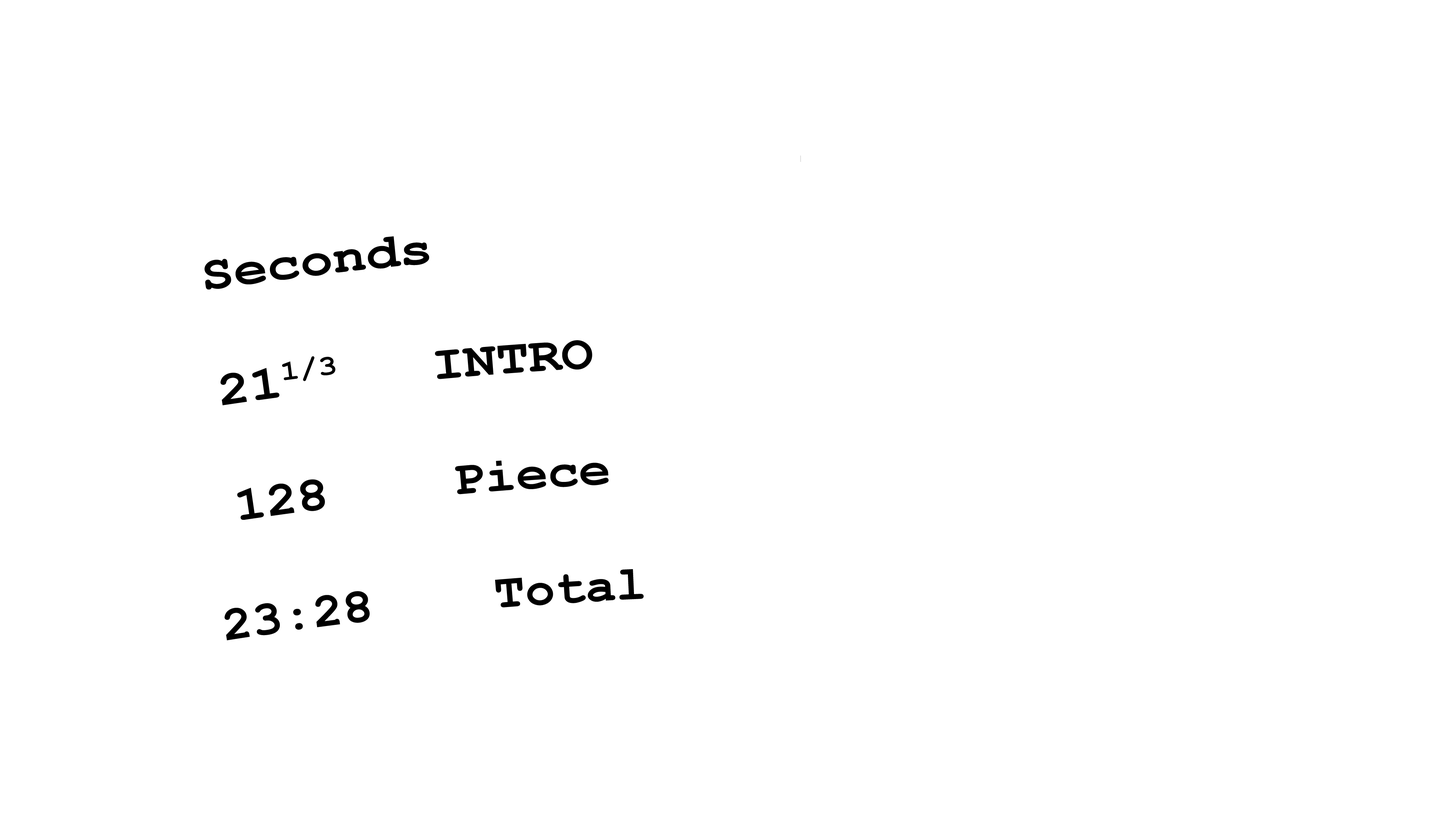
<style>
.page{position:relative;width:1456px;height:819px;background:#ffffff}
.page>*{position:absolute;margin:0}
.t1{font:48.5px "CourierNewPS-BoldMT";color:#000000}
.t2{font:62.2px "CourierNewPS-BoldMT";color:#000000}
</style>
<div class="page">
<p class="t1" style="left:204px;top:155px;width:597px;height:485px;text-align:center"><span class="t2"><br><br><br></span> Seconds<br><br> 211/3     INTRO<br><br> 128    Piece<br><br>23:28    Total</p>
</div>
